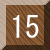
<style>
.page{position:relative;width:50px;height:50px}
.page>*{position:absolute;margin:0}
.t1{font:30px "MS-Gothic";color:#ffffff}
</style>
<div class="page">
<p class="t1" style="left:13px;top:15px;width:26px;height:23px">15</p>
</div>
